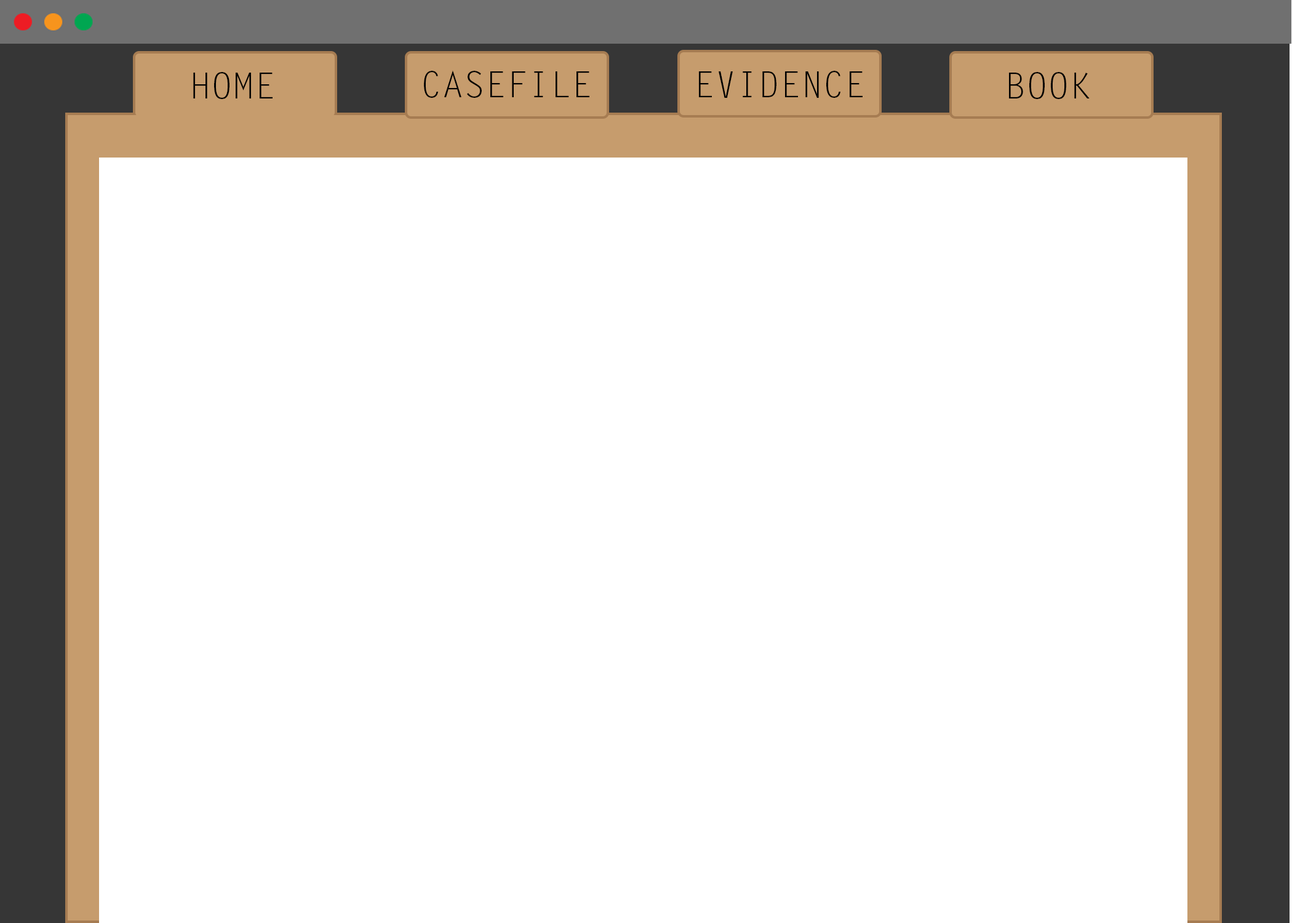
<style>
.page{position:relative;width:1292px;height:923px;background:#ffffff}
.page>*{position:absolute;margin:0}
.t1{font:35.9px "LetterGothicStd";color:#000000}
</style>
<div class="page">
<p class="t1" style="left:193px;top:72px;width:80px;height:27px">HOME</p>
<p class="t1" style="left:424px;top:70px;width:165px;height:28px">CASEFILE</p>
<p class="t1" style="left:699px;top:71px;width:164px;height:27px">EVIDENCE</p>
<p class="t1" style="left:1009px;top:72px;width:81px;height:27px">BOOK</p>
</div>
